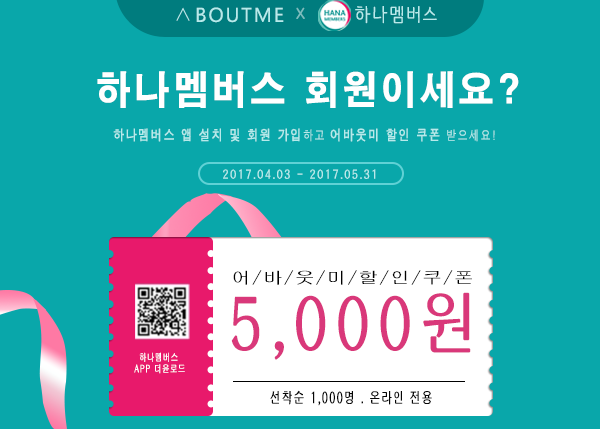
<style>
.page{position:relative;width:600px;height:429px;background:#09a7aa}
.page>*{position:absolute;margin:0}
.t1{font:19px "NanumBarunpen";letter-spacing:0.1em;color:#b7eaeb}
.t2{font:20px "MicrosoftPhagsPa";letter-spacing:0.1em;color:#b7eaeb}
.t3{font:20px "Gulim";letter-spacing:0.1em;color:#b7eaeb}
.t4{font:22px "NanumBarunpen";letter-spacing:0.1em;color:#7abcbd}
.t5{font:39px "H2gtrE";letter-spacing:0.1em;color:#ffffff;scale:0.9 1}
.t6{font:14px "H2gtrM";letter-spacing:0.1em;color:#b7eaeb;font-weight:bold;scale:0.8 1}
.t7{font:13px "H2gtrM";letter-spacing:0.1em;color:#b7eaeb;scale:0.8 1}
.t8{font:12px "H2gprM";letter-spacing:0.1em;color:#b7eaeb;font-weight:bold;scale:0.9 1}
.t9{font:16px "H2gprM";letter-spacing:0.1em;color:#000000;scale:1.2 1}
.t10{font:70px "H2gprM";letter-spacing:0.1em;color:#d9387a;font-weight:bold;scale:0.85 1}
.t11{font:10px "H2gprM";letter-spacing:0.1em;color:#ffffff;font-weight:bold;scale:0.7 1}
.t12{font:15px "H2gprM";letter-spacing:0.1em;color:#060606;font-weight:bold;scale:0.7 1}
</style>
<div class="page">
<p class="t1" style="left:355px;top:6px;width:82px;height:18px">하나멤버스</p>
<p class="t2" style="left:176px;top:7px;width:108px;height:16px"><span class="t3">∧</span>BOUTME</p>
<p class="t4" style="left:296px;top:7px;width:9px;height:12px">x</p>
<p class="t5" style="left:97px;top:71px;width:422px;height:37px">하나멤버스 회원이세요?</p>
<p class="t6" style="left:113px;top:128px;width:382px;height:14px">하나멤버스 앱 설치 및 회원 가입<span class="t7">하고 </span>어바웃미 할인 쿠폰<span class="t7"> 받으세요!</span></p>
<p class="t8" style="left:223px;top:169px;width:153px;height:10px">2017.04.03 - 2017.05.31</p>
<p class="t9" style="left:233px;top:270px;width:239px;height:15px">어/바/웃/미/할/인/쿠/폰</p>
<p class="t10" style="left:231px;top:292px;width:240px;height:68px">5,000원</p>
<p class="t11" style="left:139px;top:352px;width:39px;height:10px">하나멤버스</p>
<p class="t11" style="left:134px;top:364px;width:51px;height:10px">APP 더윤로드</p>
<p class="t12" style="left:270px;top:390px;width:162px;height:16px">선착순 1,000명 . 온라인 전용</p>
</div>
